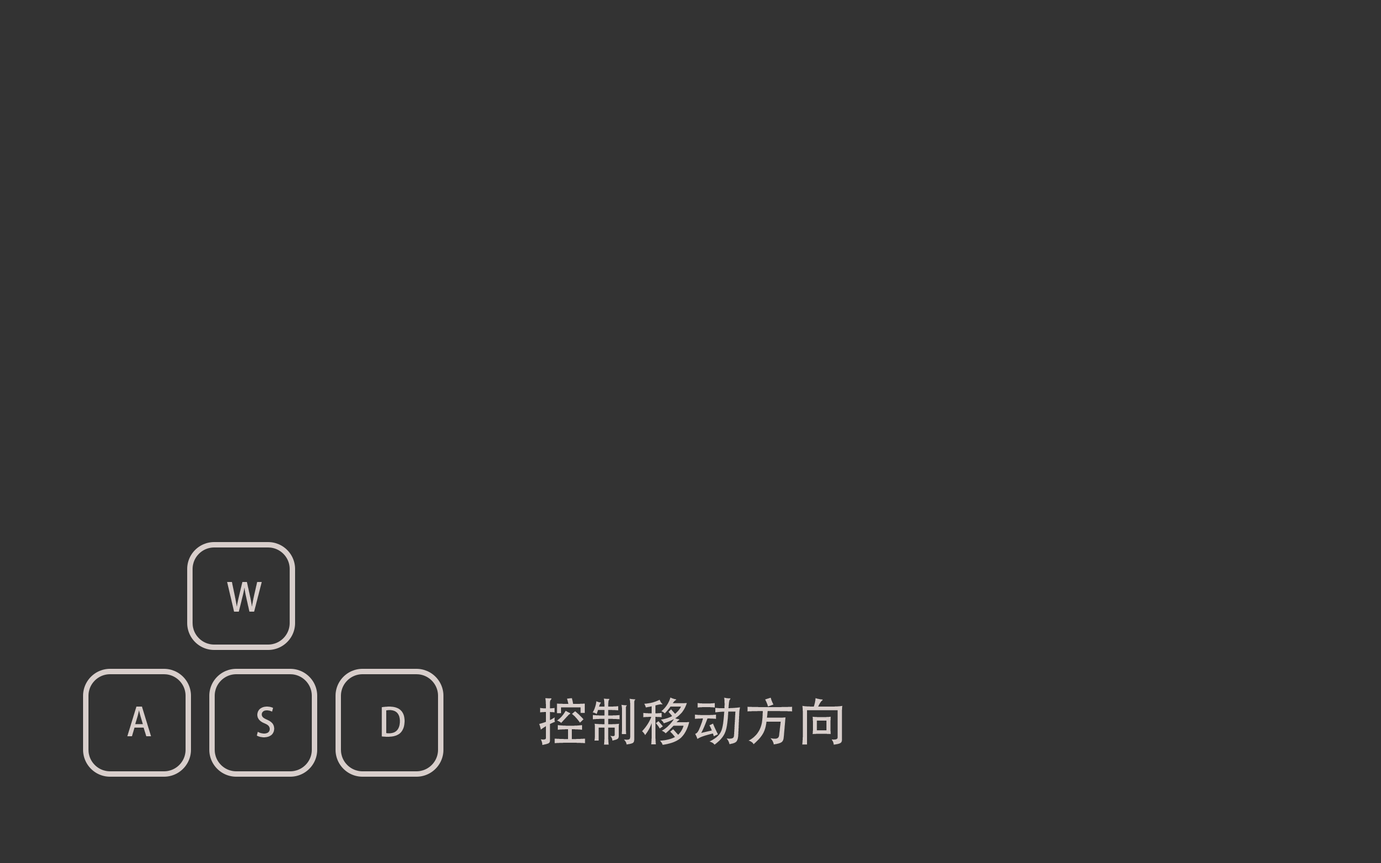
<style>
.page{position:relative;width:1381px;height:863px;background:#333333}
.page>*{position:absolute;margin:0}
.t1{font:38.8px "AdobeHeitiStd-Regular";color:#d8cecb}
.t2{font:51.8px "AdobeHeitiStd-Regular";color:#d8cecb}
</style>
<div class="page">
<p class="t1" style="left:227px;top:582px;width:35px;height:30px">W</p>
<p class="t2" style="left:539px;top:698px;width:304px;height:48px">控制移动方向</p>
<p class="t1" style="left:127px;top:707px;width:24px;height:29px">A</p>
<p class="t1" style="left:257px;top:707px;width:18px;height:31px">S</p>
<p class="t1" style="left:381px;top:707px;width:24px;height:30px">D</p>
</div>
